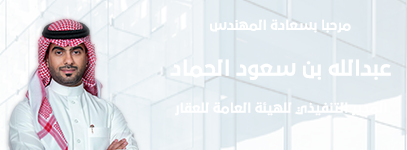
<style>
.page{position:relative;width:407px;height:150px}
.page>*{position:absolute;margin:0}
.t1{font:12.2px "29LTBukra-Bold";color:#ffffff}
.t2{font:19.6px "29LTBukra-Bold";color:#ffffff}
</style>
<div class="page">
<p class="t1" style="left:210px;top:19px;width:141px;height:14px">مرحبا بسعادة المهندس</p>
<p class="t2" style="left:170px;top:59px;width:221px;height:21px">عبدالله بن سعود الحماد</p>
<p class="t1" style="left:175px;top:102px;width:212px;height:14px">المدير التنفيذي للهيئة العامة للعقار</p>
</div>
